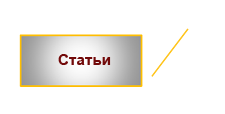
<style>
.page{position:relative;width:225px;height:114px;background:#ffffff}
.page>*{position:absolute;margin:0}
.t1{font:15.2px "Arial-BoldMT";color:#720909}
</style>
<div class="page">
<p class="t1" style="left:58px;top:54px;width:53px;height:11px">Статьи</p>
</div>
